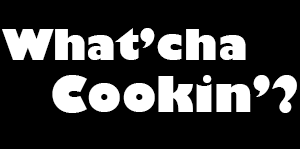
<style>
.page{position:relative;width:300px;height:149px;background:#000000}
.page>*{position:absolute;margin:0}
.t1{font:42px "GillSans-UltraBold";color:#ffffff}
.t2{font:48px "GillSans-UltraBold";color:#ffffff}
</style>
<div class="page">
<p class="t1" style="left:2px;top:28px;width:244px;height:32px">What’cha</p>
<p class="t2" style="left:52px;top:75px;width:245px;height:38px">Cookin’?</p>
</div>
